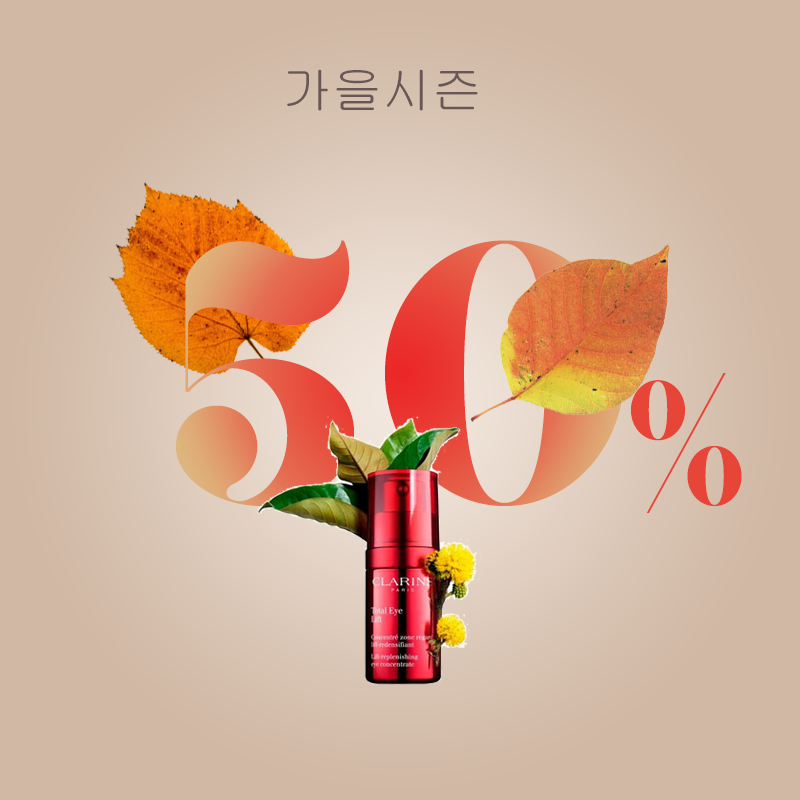
<style>
.page{position:relative;width:800px;height:800px;background:#d0b8a4}
.page>*{position:absolute;margin:0}
.t1{font:50px "Gulim";color:#695656}
.t2{font:379.4px "Giaza"}
.t3{font:200px "Giaza";color:#e84539}
</style>
<div class="page">
<p class="t1" style="left:287px;top:69px;width:191px;height:42px">가을시즌</p>
<p class="t2" style="left:176px;top:240px;width:449px;height:266px">50</p>
<p class="t3" style="left:631px;top:373px;width:111px;height:140px">%</p>
</div>
